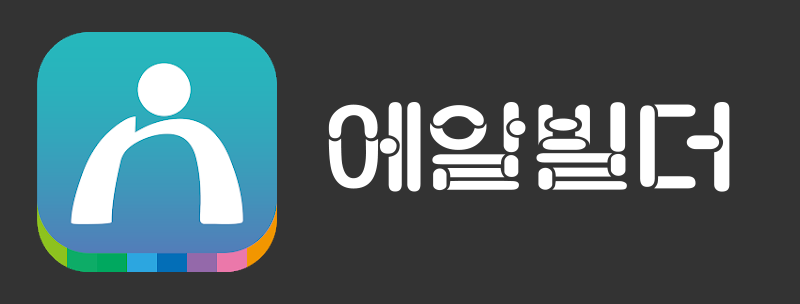
<style>
.page{position:relative;width:800px;height:304px;background:#333333}
.page>*{position:absolute;margin:0}
.t1{font:94.6px "PIC-DS-Mangul-Medium-KP-92KSC";color:#ffffff;scale:1.09 1}
</style>
<div class="page">
<p class="t1" style="left:328px;top:102px;width:402px;height:90px">에알빌더</p>
</div>
